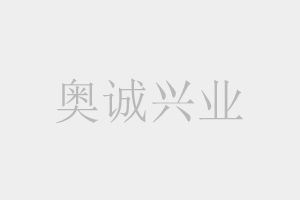
<style>
.page{position:relative;width:300px;height:200px;background:#eeeeee}
.page>*{position:absolute;margin:0}
.t1{font:48px "SimSun";color:#b9b9b9}
</style>
<div class="page">
<p class="t1" style="left:56px;top:78px;width:188px;height:46px">奥诚兴业</p>
</div>
